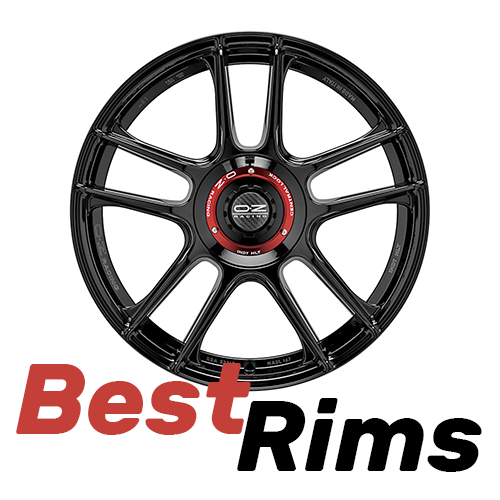
<style>
.page{position:relative;width:500px;height:500px;background:#ffffff}
.page>*{position:absolute;margin:0}
.t1{font:100px "Rubik-BoldItalic";color:#c53f39}
.t2{font:100px "Rubik-BoldItalic";color:#000000}
</style>
<div class="page">
<p class="t1" style="left:16px;top:363px;width:235px;height:72px">Best</p>
<p class="t2" style="left:237px;top:398px;width:245px;height:74px">Rims</p>
</div>
